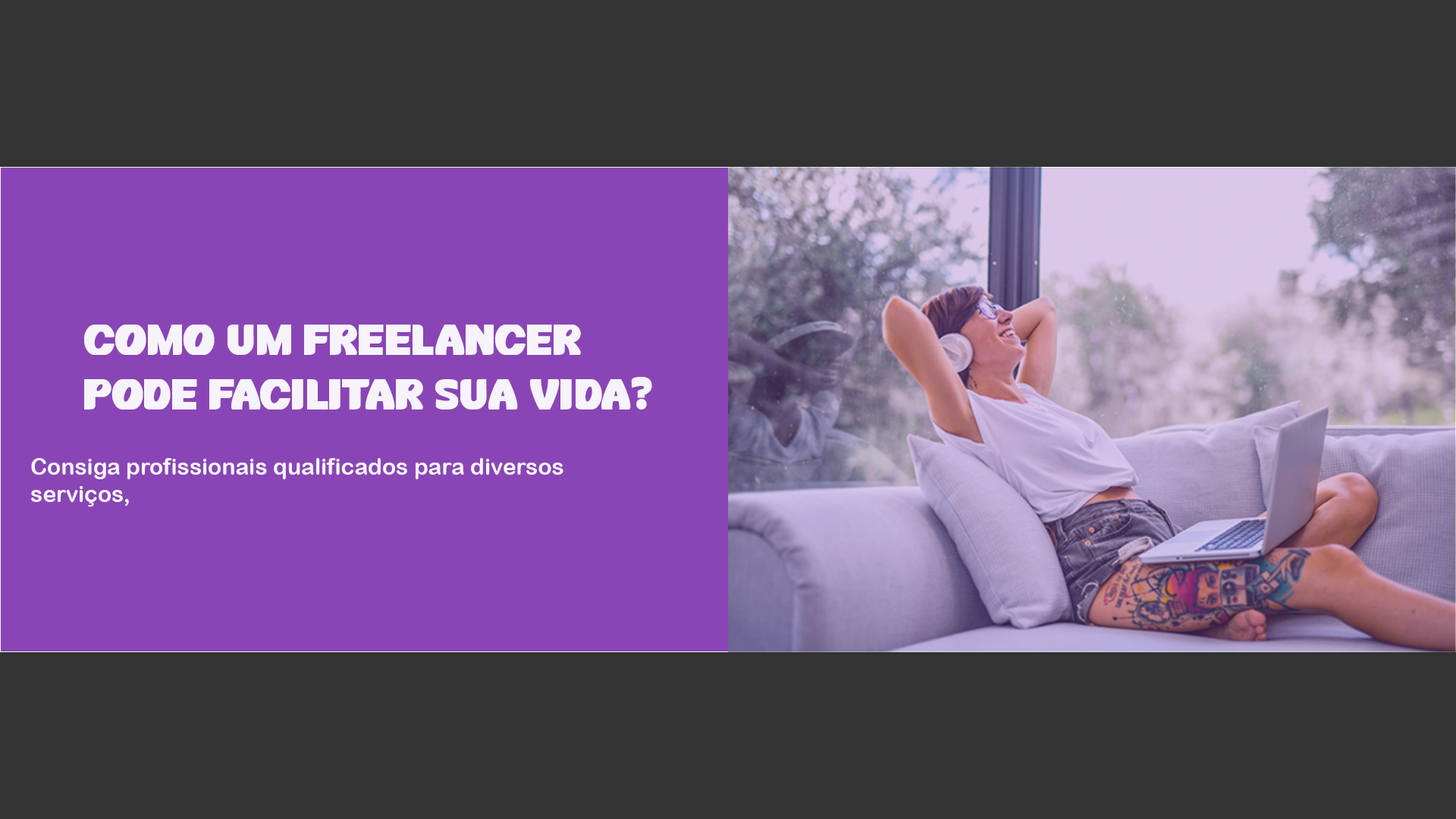
<style>
.page{position:relative;width:1456px;height:819px;background:#333333}
.page>*{position:absolute;margin:0}
.t1{font:45.5px "Rainshow";color:#f7f3fa}
.t2{font:22.7px "ArialRoundedMTBold";color:#f7f3fa}
</style>
<div class="page">
<p class="t1" style="left:84px;top:325px;width:568px;height:84px">Como um freelancer <br>pode facilitar sua vida?</p>
<p class="t2" style="left:31px;top:458px;width:532px;height:49px">Consiga profissionais qualificados para diversos <br>serviços,</p>
</div>
